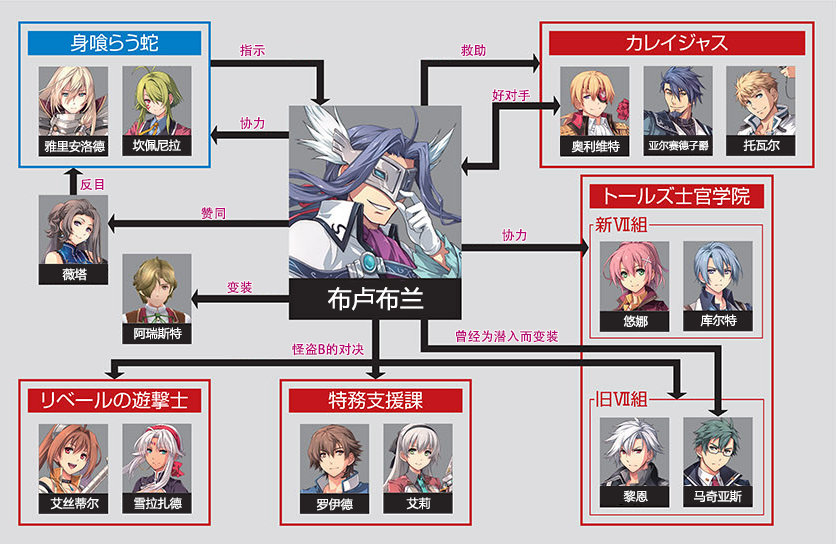
<style>
.page{position:relative;width:836px;height:544px;background:#dddddf}
.page>*{position:absolute;margin:0}
.t1{font:13px "AdobeHeitiStd-Regular";color:#b70773}
.t2{font:12px "MicrosoftYaHei";color:#ffffff}
.t3{font:10px "MicrosoftYaHei";color:#ffffff}
.t4{font:24px "MicrosoftYaHei";color:#ffffff}
</style>
<div class="page">
<p class="t1" style="left:240px;top:44px;width:25px;height:13px">指示</p>
<p class="t1" style="left:461px;top:44px;width:25px;height:13px">救助</p>
<p class="t1" style="left:492px;top:89px;width:38px;height:13px">好对手</p>
<p class="t1" style="left:240px;top:117px;width:25px;height:13px">协力</p>
<p class="t2" style="left:44px;top:140px;width:61px;height:13px">雅里安洛德</p>
<p class="t2" style="left:132px;top:139px;width:49px;height:13px">坎佩尼拉</p>
<p class="t2" style="left:571px;top:140px;width:49px;height:13px">奥利维特</p>
<p class="t3" style="left:648px;top:140px;width:61px;height:11px">亚尔赛德子爵</p>
<p class="t2" style="left:743px;top:139px;width:37px;height:12px">托瓦尔</p>
<p class="t1" style="left:80px;top:178px;width:24px;height:13px">反目</p>
<p class="t1" style="left:201px;top:207px;width:25px;height:13px">赞同</p>
<p class="t1" style="left:502px;top:229px;width:25px;height:13px">协力</p>
<p class="t2" style="left:62px;top:268px;width:25px;height:13px">薇塔</p>
<p class="t1" style="left:227px;top:281px;width:25px;height:13px">变装</p>
<p class="t4" style="left:328px;top:287px;width:96px;height:24px">布卢布兰</p>
<p class="t2" style="left:623px;top:315px;width:25px;height:13px">悠娜</p>
<p class="t2" style="left:700px;top:314px;width:37px;height:13px">库尔特</p>
<p class="t2" style="left:134px;top:327px;width:48px;height:13px">阿瑞斯特</p>
<p class="t1" style="left:456px;top:330px;width:102px;height:13px">曾经为潜入而变装</p>
<p class="t1" style="left:292px;top:343px;width:72px;height:13px">怪盗B的对决</p>
<p class="t2" style="left:50px;top:497px;width:49px;height:13px">艾丝蒂尔</p>
<p class="t2" style="left:134px;top:497px;width:48px;height:13px">雪拉扎德</p>
<p class="t2" style="left:406px;top:497px;width:25px;height:13px">艾莉</p>
<p class="t2" style="left:623px;top:490px;width:25px;height:13px">黎恩</p>
<p class="t2" style="left:694px;top:490px;width:48px;height:13px">马奇亚斯</p>
<p class="t2" style="left:316px;top:498px;width:37px;height:13px">罗伊德</p>
</div>
